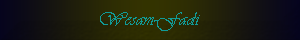
<style>
.page{position:relative;width:300px;height:40px}
.page>*{position:absolute;margin:0}
.t1{font:20.1px "Vivaldii";color:#109b98}
</style>
<div class="page">
<p class="t1" style="left:100px;top:12px;width:100px;height:19px">Wesam-Fadi</p>
</div>
